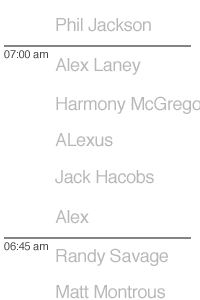
<style>
.page{position:relative;width:200px;height:300px;background:#ffffff}
.page>*{position:absolute;margin:0}
.t1{font:18px "Helvetica";letter-spacing:-0.02em;color:#b7b7b7}
.t2{font:11px "Helvetica";letter-spacing:-0.02em;color:#444444}
</style>
<div class="page">
<p class="t1" style="left:56px;top:18px;width:95px;height:14px">Phil Jackson</p>
<p class="t2" style="left:4px;top:50px;width:44px;height:9px">07:00 am</p>
<p class="t1" style="left:55px;top:58px;width:86px;height:17px">Alex Laney</p>
<p class="t1" style="left:55px;top:133px;width:58px;height:14px">ALexus</p>
<p class="t1" style="left:55px;top:170px;width:99px;height:14px">Jack Hacobs</p>
<p class="t1" style="left:55px;top:210px;width:34px;height:14px">Alex</p>
<p class="t2" style="left:4px;top:242px;width:44px;height:9px">06:45 am</p>
<p class="t1" style="left:56px;top:248px;width:112px;height:18px">Randy Savage</p>
<p class="t1" style="left:56px;top:285px;width:109px;height:14px">Matt Montrous</p>
</div>
